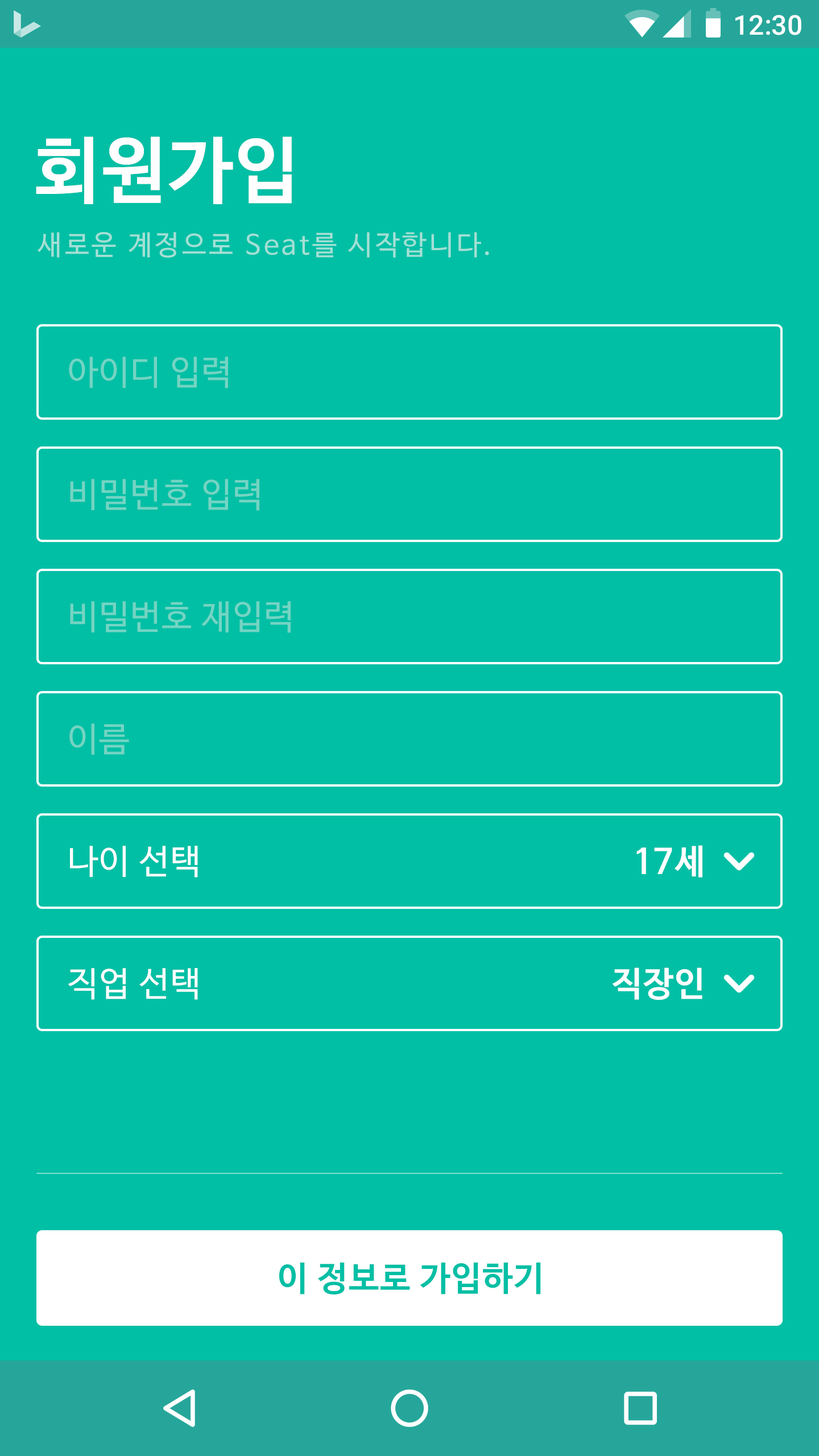
<style>
.page{position:relative;width:819px;height:1456px;background:#00bfa5}
.page>*{position:absolute;margin:0}
.t1{font:27.3px "Roboto-Medium";color:#ffffff}
.t2{font:72.8px "NanumBarunGothicBold";letter-spacing:0.025em;color:#fffefe}
.t3{font:27.3px "NanumBarunGothic";letter-spacing:0.1em;color:#a3e0d5}
.t4{font:34.1px "NanumBarunGothic";letter-spacing:0.025em;color:#74d4c3}
.t5{font:34.1px "NanumBarunGothic";letter-spacing:0.025em;color:#ffffff}
.t6{font:34.1px "NanumBarunGothicBold";letter-spacing:0.025em;color:#ffffff}
.t7{font:34.1px "NanumBarunGothicBold";letter-spacing:0.025em;color:#00bfa5}
</style>
<div class="page">
<p class="t1" style="left:735px;top:15px;width:66px;height:20px">12:30</p>
<p class="t2" style="left:36px;top:136px;width:256px;height:68px">회원가입</p>
<p class="t3" style="left:38px;top:232px;width:451px;height:26px">새로운 계정으로 Seat를 시작합니다.</p>
<p class="t4" style="left:69px;top:357px;width:159px;height:31px">아이디 입력</p>
<p class="t4" style="left:70px;top:479px;width:189px;height:32px">비밀번호 입력</p>
<p class="t4" style="left:70px;top:601px;width:221px;height:32px">비밀번호 재입력</p>
<p class="t4" style="left:69px;top:723px;width:60px;height:32px">이름</p>
<p class="t5" style="left:70px;top:846px;width:128px;height:32px">나이 선택</p>
<p class="t6" style="left:636px;top:845px;width:66px;height:33px">17세</p>
<p class="t5" style="left:68px;top:968px;width:130px;height:32px">직업 선택</p>
<p class="t6" style="left:612px;top:967px;width:90px;height:33px">직장인</p>
<p class="t7" style="left:279px;top:1262px;width:262px;height:32px">이 정보로 가입하기</p>
</div>
